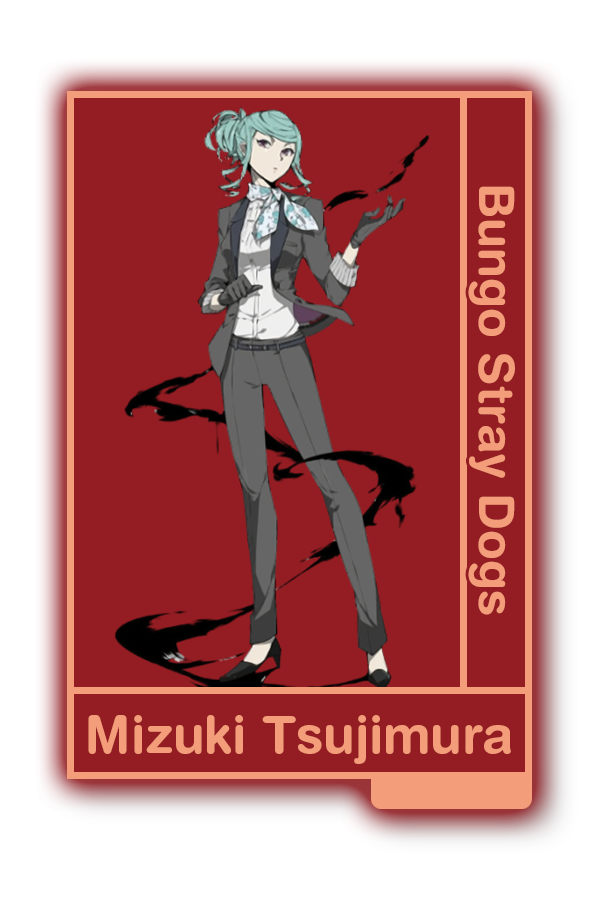
<style>
.page{position:relative;width:600px;height:900px;background:#941d23}
.page>*{position:absolute;margin:0}
.t1{font:48.8px "HelveticaRounded-Bold";color:#f39d7b}
.t2{font:51.1px "HelveticaRounded-Bold";color:#f39d7b}
</style>
<div class="page">
<p class="t1" style="left:468px;top:186px;width:47px;height:429px;rotate:90deg">Bungo Stray Dogs</p>
<p class="t2" style="left:88px;top:715px;width:423px;height:49px">Mizuki Tsujimura</p>
</div>
